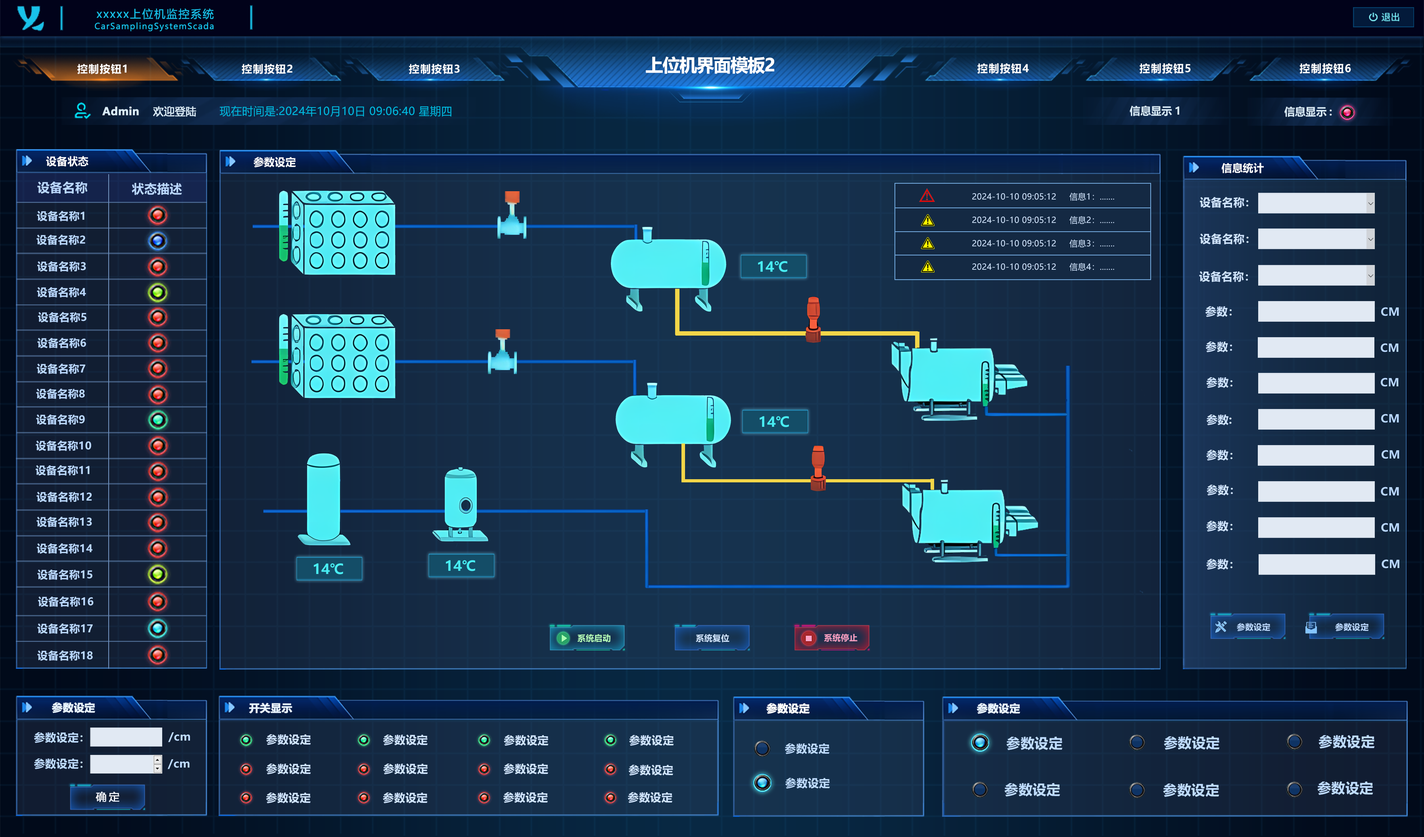
<style>
.page{position:relative;width:1424px;height:837px}
.page>*{position:absolute;margin:0}
.t1{font:11px "MicrosoftYaHei";letter-spacing:0.1em;color:#18c2ea}
.t2{font:8.3px "MicrosoftYaHei";letter-spacing:0.1em;color:#18c2ea}
.t3{font:10.4px "MicrosoftYaHei-Bold";letter-spacing:0.08em;color:#ffffff;text-transform:uppercase}
.t4{font:17.7px "MicrosoftYaHei-Bold";letter-spacing:-0.04em;color:#ffffff}
.t5{font:10.6px "MicrosoftYaHei-Bold";letter-spacing:0.08em;color:#ffffff;text-transform:uppercase}
.t6{font:10.6px "MicrosoftYaHei-Bold";color:#d9ebf7;font-weight:bold}
.t7{font:10.6px "MicrosoftYaHei";color:#d9ebf7;font-weight:bold}
.t8{font:11px "MicrosoftYaHei";letter-spacing:0.02em;color:#00b8df}
.t9{font:11px "MicrosoftYaHei";letter-spacing:0.02em;color:#bad8ff}
.t10{font:10.6px "MicrosoftYaHei-Bold";color:#d9ebf7;text-transform:uppercase}
.t11{font:10.5px "MicrosoftYaHei-Bold";letter-spacing:0.02em;color:#ffffff}
.t12{font:12.4px "MicrosoftYaHei-Bold";letter-spacing:0.02em;color:#bad8ff}
.t13{font:8.3px/23.4px "MicrosoftYaHei";letter-spacing:0.02em;color:#d0e5ff}
.t14{font:11px "MicrosoftYaHei-Bold";letter-spacing:0.02em;color:#d0e5ff}
.t15{font:10.5px "MicrosoftYaHei-Bold";letter-spacing:0.02em;color:#bad8ff}
.t16{font:13.8px "MicrosoftYaHei-Bold";letter-spacing:0.02em;color:#48eef4}
.t17{font:11px "MicrosoftYaHei-Bold";letter-spacing:0.02em;color:#bad8ff}
.t18{font:8.3px "MicrosoftYaHei-Bold";letter-spacing:0.02em;color:#bad8ff}
.t19{font:8.3px "MicrosoftYaHei-Bold";letter-spacing:0.02em;color:#b5ffb9}
.t20{font:8.3px "MicrosoftYaHei-Bold";letter-spacing:0.02em;color:#d0e5ff}
.t21{font:8.3px "MicrosoftYaHei-Bold";letter-spacing:0.02em;color:#fda1c4}
.t22{font:10.6px "MicrosoftYaHei-Bold";color:#e8f4ff;font-weight:bold}
.t23{font:10.6px "MicrosoftYaHei-Bold";color:#ffffff;font-weight:bold}
.t24{font:11px/26.5px "MicrosoftYaHei-Bold";letter-spacing:0.02em;color:#bfdcff}
.t25{font:11px "MicrosoftYaHei-Bold";letter-spacing:0.02em;color:#bfdcff}
.t26{font:13.8px "MicrosoftYaHei-Bold";letter-spacing:0.02em;color:#bfdcff}
.t27{font:10.6px "MicrosoftYaHei";letter-spacing:0.2em;color:#ffffff;font-weight:bold}
</style>
<div class="page">
<p class="t1" style="left:96px;top:8px;width:118px;height:11px">xxxxx上位机监控系统</p>
<p class="t2" style="left:95px;top:22px;width:119px;height:9px">CarSamplingSystemScada</p>
<p class="t3" style="left:77px;top:64px;width:50px;height:10px">控制按钮1</p>
<p class="t3" style="left:242px;top:64px;width:50px;height:10px">控制按钮2</p>
<p class="t3" style="left:409px;top:64px;width:51px;height:10px">控制按钮3</p>
<p class="t4" style="left:646px;top:56px;width:128px;height:18px">上位机界面模板2</p>
<p class="t5" style="left:978px;top:63px;width:51px;height:11px">控制按钮4</p>
<p class="t5" style="left:1140px;top:63px;width:51px;height:11px">控制按钮5</p>
<p class="t5" style="left:1300px;top:63px;width:51px;height:11px">控制按钮6</p>
<p class="t6" style="left:102px;top:106px;width:94px;height:11px">Admin    <span class="t7">欢迎登陆</span></p>
<p class="t8" style="left:220px;top:106px;width:232px;height:11px"><span class="t9">          </span>现在时间是:2024年10月10日 09:06:40 星期四</p>
<p class="t10" style="left:1130px;top:106px;width:50px;height:10px">信息显示1</p>
<p class="t10" style="left:1285px;top:106px;width:47px;height:11px">信息显示:</p>
<p class="t11" style="left:46px;top:156px;width:42px;height:11px">设备状态</p>
<p class="t11" style="left:254px;top:157px;width:42px;height:10px">参数设定</p>
<p class="t11" style="left:1222px;top:163px;width:42px;height:10px">信息统计</p>
<p class="t12" style="left:37px;top:181px;width:51px;height:13px">设备名称</p>
<p class="t12" style="left:132px;top:183px;width:50px;height:12px">状态描述</p>
<p class="t13" style="left:972px;top:192px;width:143px;height:79px">2024-10-10 09:05:12     信息1：.......<br>2024-10-10 09:05:12     信息2：.......<br>2024-10-10 09:05:12     信息3：.......<br>2024-10-10 09:05:12     信息4：.......</p>
<p class="t14" style="left:1200px;top:197px;width:49px;height:11px">设备名称：</p>
<p class="t15" style="left:37px;top:211px;width:48px;height:10px">设备名称1</p>
<p class="t14" style="left:1200px;top:233px;width:49px;height:11px">设备名称：</p>
<p class="t15" style="left:37px;top:234px;width:48px;height:11px">设备名称2</p>
<p class="t15" style="left:37px;top:261px;width:49px;height:11px">设备名称3</p>
<p class="t16" style="left:758px;top:261px;width:30px;height:11px">14℃</p>
<p class="t14" style="left:1199px;top:271px;width:49px;height:11px">设备名称：</p>
<p class="t15" style="left:37px;top:287px;width:49px;height:11px">设备名称4</p>
<p class="t14" style="left:1205px;top:306px;width:27px;height:11px">参数：</p>
<p class="t15" style="left:38px;top:312px;width:48px;height:11px">设备名称5</p>
<p class="t15" style="left:37px;top:338px;width:49px;height:10px">设备名称6</p>
<p class="t14" style="left:1206px;top:341px;width:26px;height:11px">参数：</p>
<p class="t15" style="left:37px;top:363px;width:48px;height:11px">设备名称7</p>
<p class="t14" style="left:1207px;top:377px;width:26px;height:11px">参数：</p>
<p class="t15" style="left:36px;top:388px;width:49px;height:11px">设备名称8</p>
<p class="t15" style="left:36px;top:414px;width:49px;height:11px">设备名称9</p>
<p class="t16" style="left:760px;top:416px;width:29px;height:11px">14℃</p>
<p class="t14" style="left:1207px;top:414px;width:25px;height:11px">参数:</p>
<p class="t15" style="left:36px;top:440px;width:55px;height:11px">设备名称10</p>
<p class="t14" style="left:1207px;top:450px;width:26px;height:11px">参数：</p>
<p class="t15" style="left:36px;top:465px;width:54px;height:11px">设备名称11</p>
<p class="t14" style="left:1207px;top:484px;width:26px;height:12px">参数：</p>
<p class="t15" style="left:37px;top:492px;width:55px;height:10px">设备名称12</p>
<p class="t17" style="left:1381px;top:487px;width:18px;height:9px">CM</p>
<p class="t15" style="left:37px;top:517px;width:55px;height:10px">设备名称13</p>
<p class="t14" style="left:1207px;top:521px;width:26px;height:11px">参数：</p>
<p class="t17" style="left:1382px;top:523px;width:17px;height:9px">CM</p>
<p class="t15" style="left:37px;top:543px;width:55px;height:11px">设备名称14</p>
<p class="t15" style="left:37px;top:569px;width:55px;height:11px">设备名称15</p>
<p class="t16" style="left:314px;top:563px;width:29px;height:12px">14℃</p>
<p class="t16" style="left:446px;top:560px;width:29px;height:11px">14℃</p>
<p class="t14" style="left:1207px;top:559px;width:26px;height:11px">参数：</p>
<p class="t17" style="left:1382px;top:559px;width:18px;height:10px">CM</p>
<p class="t15" style="left:38px;top:596px;width:56px;height:11px">设备名称16</p>
<p class="t15" style="left:37px;top:623px;width:56px;height:11px">设备名称17</p>
<p class="t18" style="left:1237px;top:623px;width:34px;height:8px">参数设定</p>
<p class="t18" style="left:1335px;top:623px;width:34px;height:8px">参数设定</p>
<p class="t19" style="left:577px;top:634px;width:34px;height:8px">系统启动</p>
<p class="t20" style="left:696px;top:634px;width:34px;height:8px">系统复位</p>
<p class="t21" style="left:824px;top:634px;width:34px;height:8px">系统停止</p>
<p class="t15" style="left:37px;top:650px;width:56px;height:11px">设备名称18</p>
<p class="t22" style="left:52px;top:702px;width:43px;height:11px">参数设定</p>
<p class="t22" style="left:249px;top:703px;width:43px;height:11px">开关显示</p>
<p class="t23" style="left:767px;top:703px;width:43px;height:11px">参数设定</p>
<p class="t22" style="left:977px;top:703px;width:43px;height:11px">参数设定</p>
<p class="t24" style="left:34px;top:732px;width:49px;height:37px">参数设定：<br>参数设定：</p>
<p class="t25" style="left:168px;top:732px;width:22px;height:10px">/cm</p>
<p class="t14" style="left:266px;top:734px;width:45px;height:11px">参数设定</p>
<p class="t14" style="left:383px;top:734px;width:45px;height:12px">参数设定</p>
<p class="t14" style="left:504px;top:735px;width:45px;height:11px">参数设定</p>
<p class="t14" style="left:629px;top:735px;width:45px;height:11px">参数设定</p>
<p class="t26" style="left:1007px;top:736px;width:56px;height:14px">参数设定</p>
<p class="t26" style="left:1164px;top:736px;width:56px;height:14px">参数设定</p>
<p class="t26" style="left:1319px;top:735px;width:56px;height:14px">参数设定</p>
<p class="t25" style="left:785px;top:743px;width:45px;height:11px">参数设定</p>
<p class="t25" style="left:167px;top:759px;width:23px;height:10px">/cm</p>
<p class="t14" style="left:266px;top:763px;width:45px;height:11px">参数设定</p>
<p class="t14" style="left:383px;top:763px;width:45px;height:11px">参数设定</p>
<p class="t14" style="left:503px;top:763px;width:45px;height:11px">参数设定</p>
<p class="t14" style="left:628px;top:765px;width:45px;height:11px">参数设定</p>
<p class="t25" style="left:785px;top:778px;width:45px;height:11px">参数设定</p>
<p class="t26" style="left:1005px;top:783px;width:56px;height:14px">参数设定</p>
<p class="t26" style="left:1163px;top:783px;width:57px;height:14px">参数设定</p>
<p class="t26" style="left:1318px;top:781px;width:56px;height:14px">参数设定</p>
<p class="t27" style="left:96px;top:792px;width:23px;height:10px">确定</p>
<p class="t14" style="left:266px;top:792px;width:45px;height:11px">参数设定</p>
<p class="t14" style="left:383px;top:792px;width:45px;height:11px">参数设定</p>
<p class="t14" style="left:503px;top:792px;width:45px;height:11px">参数设定</p>
<p class="t14" style="left:628px;top:792px;width:45px;height:11px">参数设定</p>
</div>
